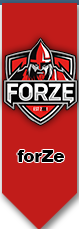
<style>
.page{position:relative;width:79px;height:229px;background:#c11c1a}
.page>*{position:absolute;margin:0}
.t1{font:16.7px "Arial-Black";letter-spacing:-0.01em;color:#000000}
</style>
<div class="page">
<p class="t1" style="left:17px;top:150px;width:47px;height:12px">forZe</p>
</div>
